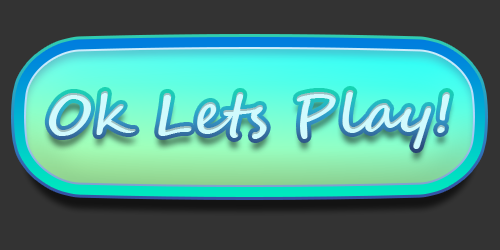
<style>
.page{position:relative;width:500px;height:250px;background:#333333}
.page>*{position:absolute;margin:0}
.t1{font:58.3px "SegoeScript-Bold";color:#d3faff}
</style>
<div class="page">
<p class="t1" style="left:48px;top:90px;width:402px;height:59px;opacity:0.96">Ok Lets Play!</p>
</div>
